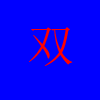
<style>
.page{position:relative;width:100px;height:100px;background:#0000ff}
.page>*{position:absolute;margin:0}
.t1{font:48px "SimSun";color:#ff0000}
</style>
<div class="page">
<p class="t1" style="left:29px;top:27px;width:44px;height:39px">双</p>
</div>
